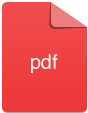
<style>
.page{position:relative;width:88px;height:113px}
.page>*{position:absolute;margin:0}
.t1{font:20px "Helvetica";color:#ffffff}
</style>
<div class="page">
<p class="t1" style="left:31px;top:54px;width:27px;height:19px">pdf</p>
</div>
